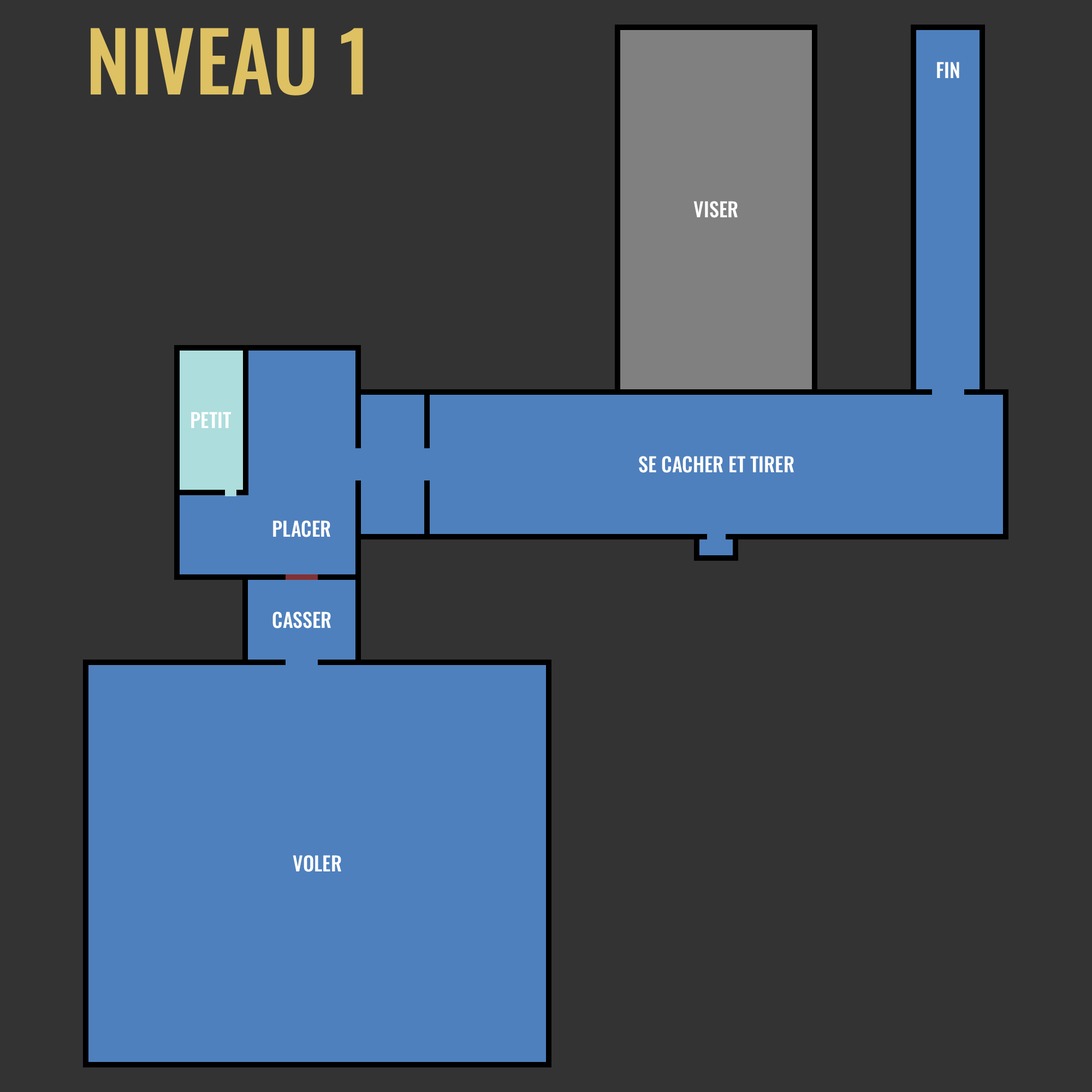
<style>
.page{position:relative;width:1092px;height:1092px;background:#333333}
.page>*{position:absolute;margin:0}
.t1{font:81.9px "Oswald-Medium";color:#dec162}
.t2{font:19.7px "Oswald-Medium";color:#ffffff}
</style>
<div class="page">
<p class="t1" style="left:91px;top:28px;width:272px;height:68px">NIVEAU 1</p>
<p class="t2" style="left:937px;top:62px;width:22px;height:16px">FIN</p>
<p class="t2" style="left:693px;top:201px;width:45px;height:17px">VISER</p>
<p class="t2" style="left:191px;top:412px;width:40px;height:16px">PETIT</p>
<p class="t2" style="left:639px;top:456px;width:155px;height:17px">SE CACHER ET TIRER</p>
<p class="t2" style="left:273px;top:520px;width:57px;height:17px">PLACER</p>
<p class="t2" style="left:272px;top:612px;width:59px;height:16px">CASSER</p>
<p class="t2" style="left:293px;top:855px;width:48px;height:17px">VOLER</p>
</div>
